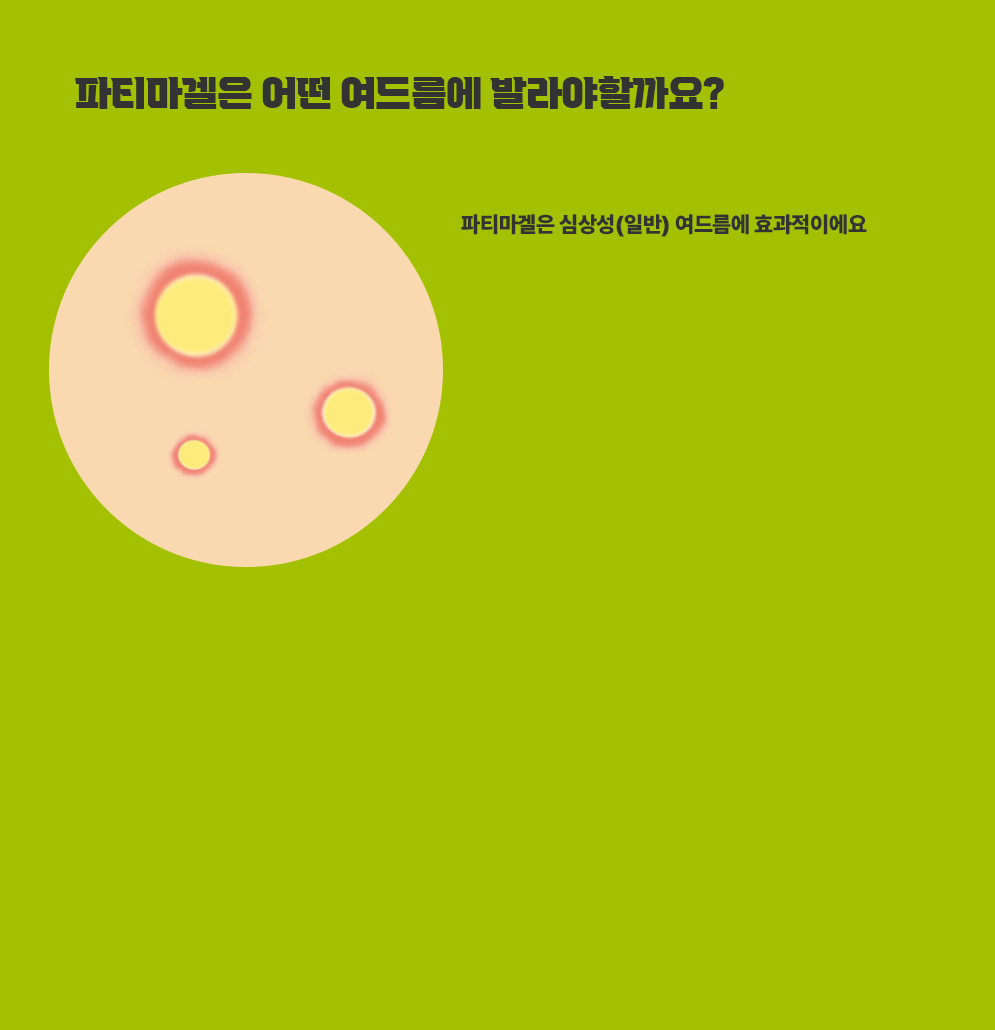
<style>
.page{position:relative;width:995px;height:1030px;background:#a3c100}
.page>*{position:absolute;margin:0}
.t1{font:36px "VITRO-CORE-TTF";letter-spacing:-0.015em;color:#333333}
.t2{font:22px "Pretendard-Black";letter-spacing:-0.015em;color:#333333}
</style>
<div class="page">
<p class="t1" style="left:75px;top:76px;width:649px;height:33px">파티마겔은 어떤 여드름에 발라야할까요?</p>
<p class="t2" style="left:461px;top:214px;width:406px;height:23px">파티마겔은 심상성(일반) 여드름에 효과적이에요</p>
</div>
